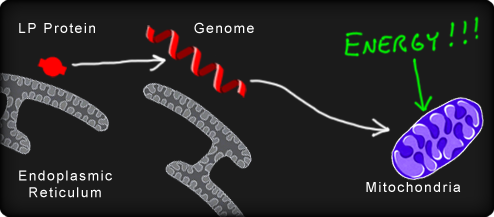
<style>
.page{position:relative;width:494px;height:217px;background:#1b1b1b}
.page>*{position:absolute;margin:0}
.t1{font:14px "ArialMT";letter-spacing:0.1em;color:#ffffff}
</style>
<div class="page">
<p class="t1" style="left:19px;top:23px;width:76px;height:10px">LP Protein</p>
<p class="t1" style="left:194px;top:22px;width:60px;height:12px">Genome</p>
<p class="t1" style="left:19px;top:170px;width:93px;height:28px;text-align:center">Endoplasmic<br>Reticulum</p>
<p class="t1" style="left:366px;top:182px;width:95px;height:10px">Mitochondria</p>
</div>
